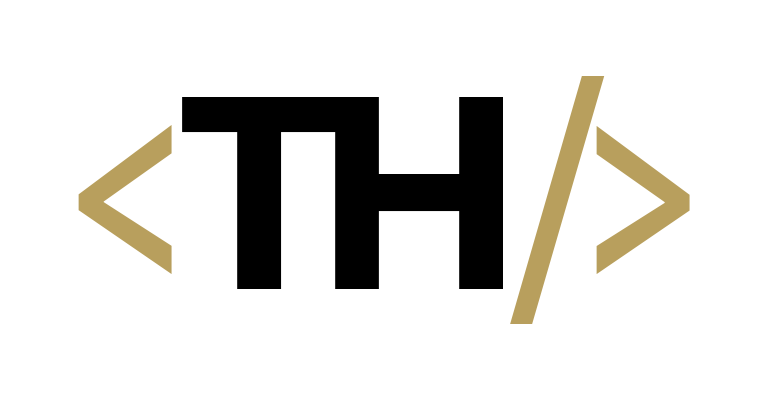
<style>
.page{position:relative;width:768px;height:400px;background:#ffffff}
.page>*{position:absolute;margin:0}
.t1{font:303.8px "SegoeUI-Semibold";letter-spacing:-0.1em;color:#b89f5d;scale:0.7 1}
.t2{font:274.3px "SegoeUI-Bold";letter-spacing:-0.1em;color:#000000}
.t3{font:274.3px "SegoeUI-Bold";letter-spacing:-0.04em;color:#000000}
.t4{font:303.8px "SegoeUI-Semibold";letter-spacing:-0.155em;color:#b89f5d;scale:0.7 1}
.t5{font:303.8px "SegoeUI-Semibold";letter-spacing:-0.12em;color:#b89f5d;scale:0.7 1}
</style>
<div class="page">
<p class="t1" style="left:78px;top:76px;width:612px;height:248px">&lt;<span class="t2">T</span><span class="t3">H</span><span class="t4">/</span><span class="t5">&gt;</span></p>
</div>
